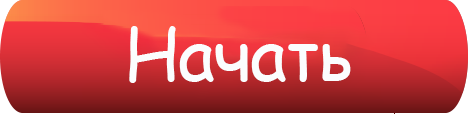
<style>
.page{position:relative;width:468px;height:114px}
.page>*{position:absolute;margin:0}
.t1{font:72px "ComicSansMS";letter-spacing:-0.02em;color:#fbfdfe}
</style>
<div class="page">
<p class="t1" style="left:129px;top:26px;width:222px;height:57px">Начать</p>
</div>
